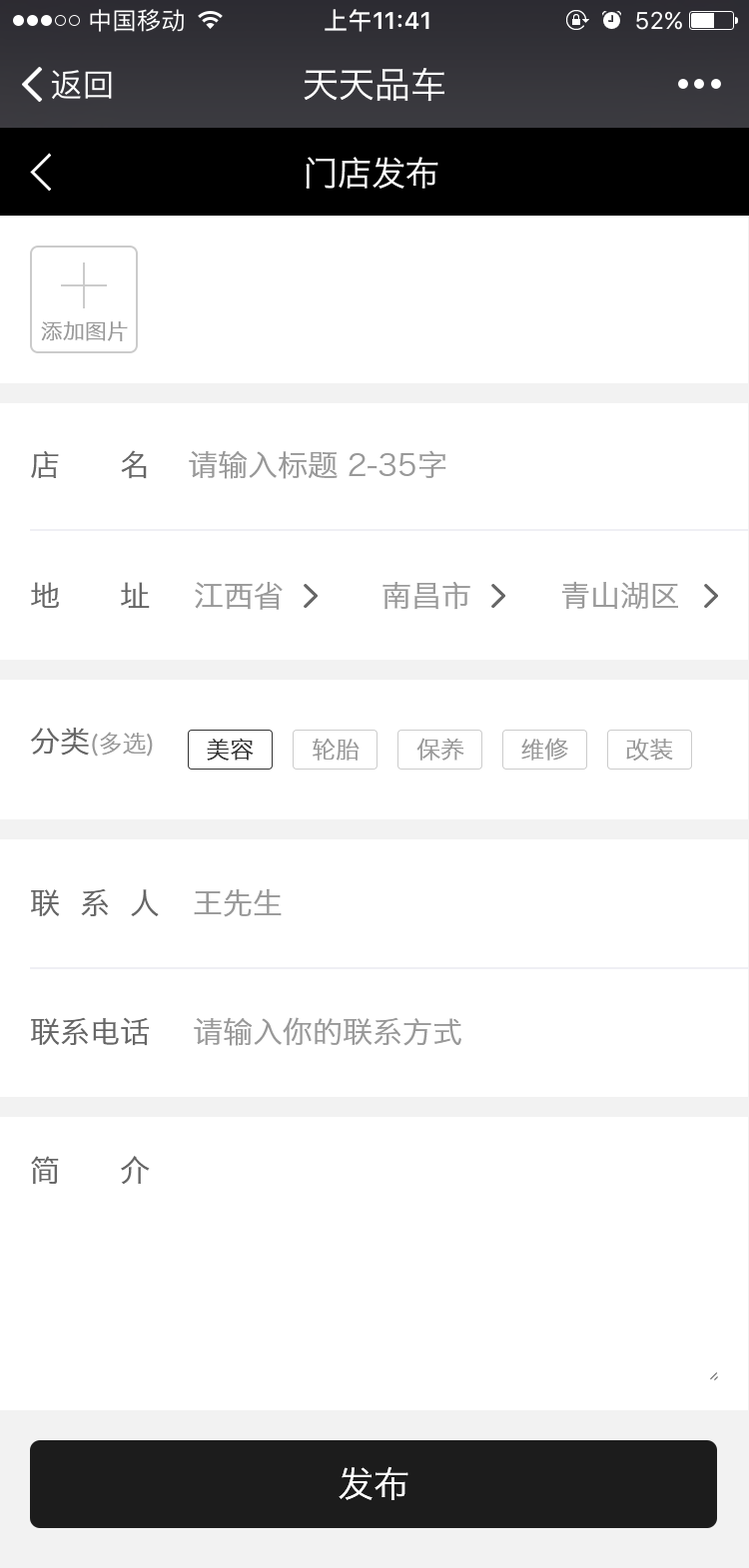
<style>
.page{position:relative;width:749px;height:1568px;background:#ffffff}
.page>*{position:absolute;margin:0}
.t1{font:35.9px "HiraginoSansGB-W3";color:#ffffff}
.t2{font:33.9px "HiraginoSansGB-W3";color:#ffffff}
.t3{font:22px "HiraginoSansGB-W3";color:#999999}
.t4{font:29.9px "HiraginoSansGB-W3";color:#666666;text-transform:uppercase}
.t5{font:29.9px "HiraginoSansGB-W3";color:#999999;text-transform:uppercase}
.t6{font:24px "HiraginoSansGB-W3";color:#999999;text-transform:uppercase}
.t7{font:24px "HiraginoSansGB-W3";color:#333333}
.t8{font:24px "HiraginoSansGB-W3";color:#999999}
.t9{font:35.9px "HiraginoSansGB-W3";color:#ffffff;text-transform:uppercase}
</style>
<div class="page">
<p class="t1" style="left:303px;top:68px;width:141px;height:34px">天天品车</p>
<p class="t2" style="left:305px;top:157px;width:133px;height:32px">门店发布</p>
<p class="t3" style="left:41px;top:321px;width:87px;height:20px">添加图片</p>
<p class="t4" style="left:31px;top:450px;width:116px;height:29px">店      名</p>
<p class="t5" style="left:189px;top:450px;width:257px;height:29px">请输入标题 2-35字</p>
<p class="t4" style="left:31px;top:582px;width:119px;height:27px">地      址</p>
<p class="t5" style="left:195px;top:582px;width:87px;height:28px">江西省</p>
<p class="t5" style="left:382px;top:581px;width:88px;height:29px">南昌市</p>
<p class="t5" style="left:562px;top:581px;width:116px;height:29px">青山湖区</p>
<p class="t6" style="left:30px;top:727px;width:123px;height:30px"><span class="t4">分类</span>(多选)</p>
<p class="t7" style="left:207px;top:738px;width:47px;height:23px">美容</p>
<p class="t8" style="left:312px;top:738px;width:47px;height:23px">轮胎</p>
<p class="t8" style="left:416px;top:738px;width:48px;height:23px">保养</p>
<p class="t8" style="left:521px;top:738px;width:47px;height:23px">维修</p>
<p class="t8" style="left:626px;top:739px;width:47px;height:22px">改装</p>
<p class="t4" style="left:31px;top:888px;width:128px;height:28px">联  系  人</p>
<p class="t5" style="left:194px;top:888px;width:87px;height:29px">王先生</p>
<p class="t4" style="left:31px;top:1017px;width:118px;height:29px">联系电话</p>
<p class="t5" style="left:194px;top:1017px;width:267px;height:29px">请输入你的联系方式</p>
<p class="t4" style="left:31px;top:1156px;width:119px;height:29px">简      介</p>
<p class="t9" style="left:338px;top:1466px;width:70px;height:34px">发布</p>
</div>
